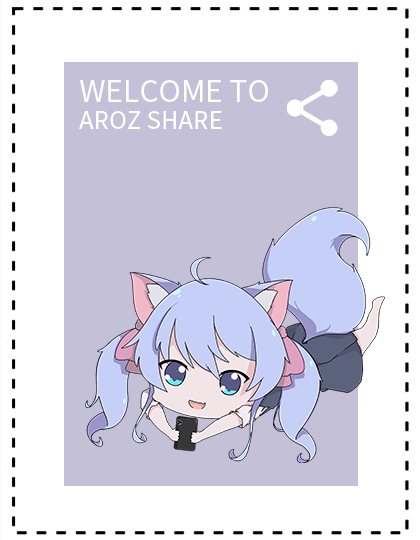
<style>
.page{position:relative;width:420px;height:540px;background:#ffffff}
.page>*{position:absolute;margin:0}
.t1{font:30px/32.5px "NotoSansTC-Regular";color:#ffffff}
.t2{font:24px/25.5px "NotoSansTC-Regular";color:#ffffff}
</style>
<div class="page">
<p class="t1" style="left:79px;top:80px;width:189px;height:49px">WELCOME TO <br><span class="t2">AROZ SHARE</span></p>
</div>
